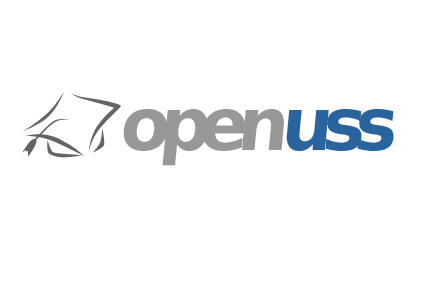
<style>
.page{position:relative;width:425px;height:283px;background:#ffffff}
.page>*{position:absolute;margin:0}
.t1{font:73.4px "BitstreamVeraSans-Bold";letter-spacing:-0.15em;color:#989898}
.t2{font:73.4px "BitstreamVeraSans-Bold";letter-spacing:-0.1em;color:#989898}
.t3{font:73.4px "BitstreamVeraSans-Bold";letter-spacing:-0.15em;color:#2a649f}
</style>
<div class="page">
<p class="t1" style="left:123px;top:109px;width:271px;height:57px">ope<span class="t2">n</span><span class="t3">uss</span></p>
</div>
